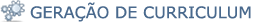
<style>
.page{position:relative;width:260px;height:23px;background:#ffffff}
.page>*{position:absolute;margin:0}
.t1{font:16px "Verdana";color:#49698d}
</style>
<div class="page">
<p class="t1" style="left:30px;top:2px;width:221px;height:20px">GERAÇÃO DE CURRICULUM</p>
</div>
